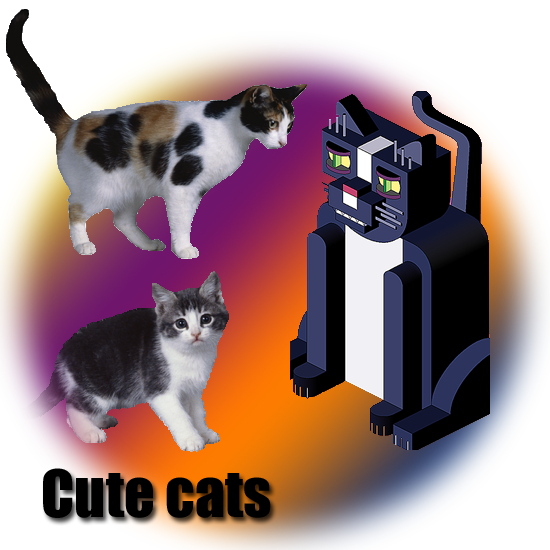
<style>
.page{position:relative;width:550px;height:550px}
.page>*{position:absolute;margin:0}
.t1{font:60px "Impact";color:#000000}
</style>
<div class="page">
<p class="t1" style="left:43px;top:468px;width:228px;height:50px">Cute cats</p>
</div>
